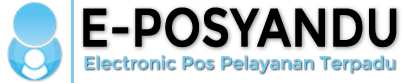
<style>
.page{position:relative;width:403px;height:83px;background:#ffffff}
.page>*{position:absolute;margin:0}
.t1{font:53.7px "Montserrat-Regular";color:#000000;font-weight:bold;scale:0.83 1}
.t2{font:18.2px "Montserrat-Regular";color:#75cbf2}
</style>
<div class="page">
<p class="t1" style="left:83px;top:7px;width:314px;height:41px">E-POSYANDU</p>
<p class="t2" style="left:84px;top:55px;width:311px;height:18px">Electronic Pos Pelayanan Terpadu</p>
</div>
